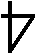
<style>
.page{position:relative;width:35px;height:56px;background:#ffffff}
.page>*{position:absolute;margin:0}
.t1{font:66px "OPPOSans-R";color:#000000}
</style>
<div class="page">
<p class="t1" style="left:1px;top:1px;width:34px;height:52px;rotate:180deg">4</p>
</div>
